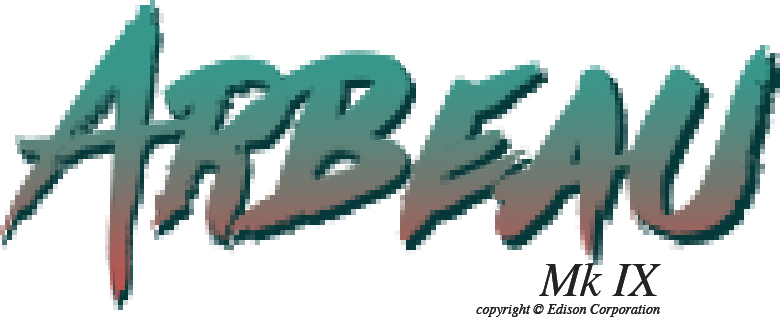
<style>
.page{position:relative;width:780px;height:317px;background:#ffffff}
.page>*{position:absolute;margin:0}
.t1{font:48px "Times-Italic";color:#262223}
.t2{font:14px "Times-Italic";color:#262223}
</style>
<div class="page">
<p class="t1" style="left:539px;top:263px;width:122px;height:33px">Mk IX</p>
<p class="t2" style="left:476px;top:304px;width:184px;height:13px">copyright © Edison Corporation</p>
</div>
